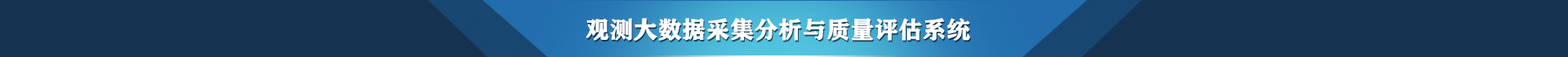
<style>
.page{position:relative;width:1568px;height:57px;background:#163251}
.page>*{position:absolute;margin:0}
.t1{font:23.4px "FZCHSJW--GB1-0";color:#ffffff;font-weight:bold}
</style>
<div class="page">
<p class="t1" style="left:586px;top:17px;width:384px;height:24px">观测大数据采集分析与质量评估系统</p>
</div>
